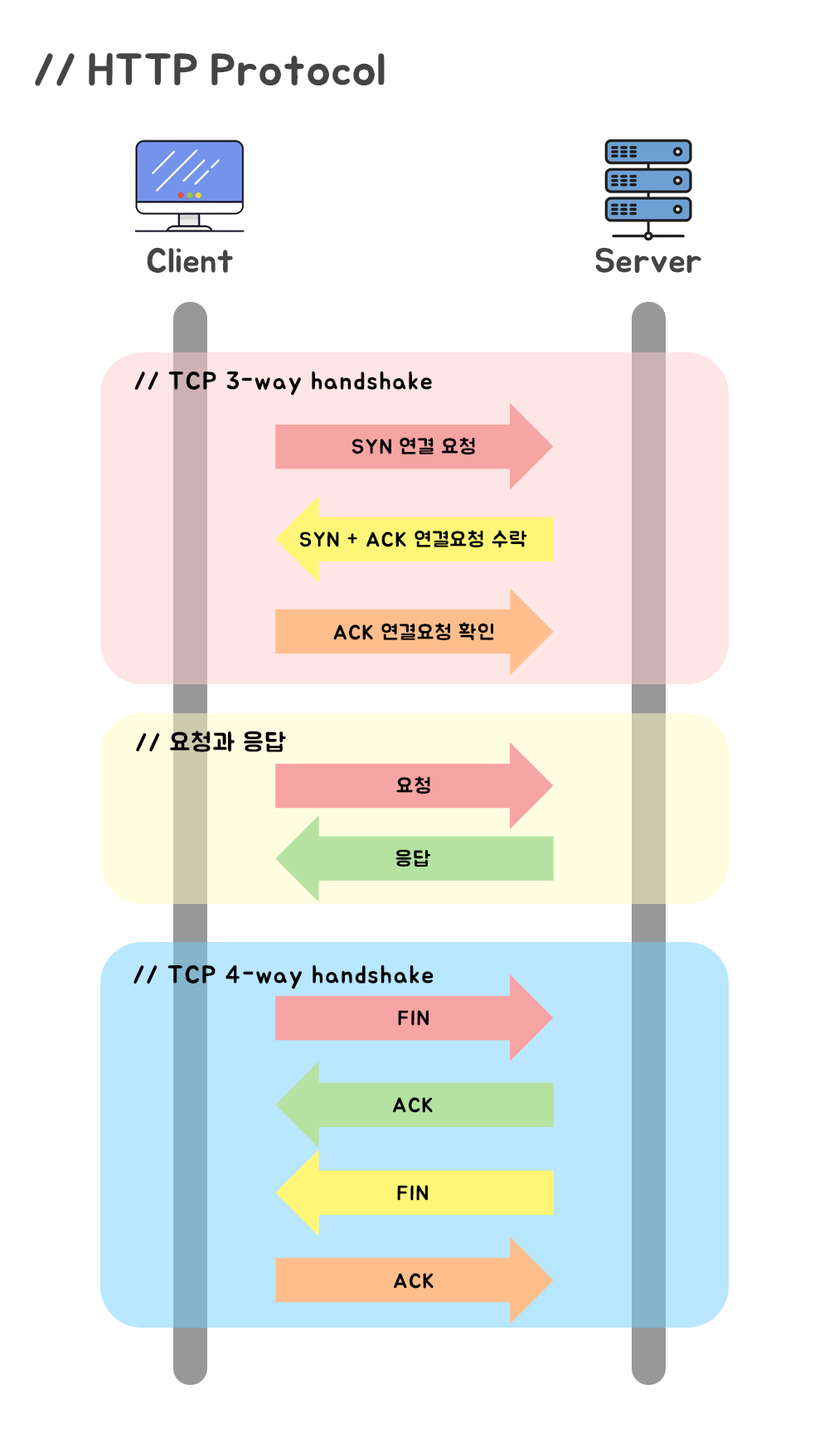
<style>
.page{position:relative;width:829px;height:1438px;background:#ffffff}
.page>*{position:absolute;margin:0}
.t1{font:44.9px "BMJUA";color:#444444}
.t2{font:34.6px "BMJUA";color:#444444}
.t3{font:25.2px "BMJUA";letter-spacing:0.05em;color:#000000}
.t4{font:20.7px "BMJUA";letter-spacing:0.05em;color:#000000}
</style>
<div class="page">
<p class="t1" style="left:35px;top:53px;width:350px;height:33px">// HTTP Protocol</p>
<p class="t2" style="left:147px;top:247px;width:86px;height:26px">Client</p>
<p class="t2" style="left:595px;top:247px;width:107px;height:26px">Server</p>
<p class="t3" style="left:134px;top:371px;width:298px;height:25px">// TCP 3-way handshake</p>
<p class="t4" style="left:352px;top:437px;width:123px;height:17px">SYN 연결 요청</p>
<p class="t4" style="left:300px;top:530px;width:227px;height:18px">SYN + ACK 연결요청 수락</p>
<p class="t4" style="left:333px;top:622px;width:161px;height:18px">ACK 연결요청 확인</p>
<p class="t3" style="left:136px;top:731px;width:150px;height:21px">// 요청과 응답</p>
<p class="t4" style="left:396px;top:776px;width:34px;height:18px">요청</p>
<p class="t4" style="left:396px;top:849px;width:34px;height:18px">응답</p>
<p class="t3" style="left:134px;top:964px;width:300px;height:25px">// TCP 4-way handshake</p>
<p class="t4" style="left:398px;top:1010px;width:31px;height:16px">FIN</p>
<p class="t4" style="left:393px;top:1097px;width:40px;height:16px">ACK</p>
<p class="t4" style="left:397px;top:1185px;width:31px;height:16px">FIN</p>
<p class="t4" style="left:394px;top:1273px;width:40px;height:16px">ACK</p>
</div>
